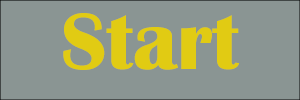
<style>
.page{position:relative;width:300px;height:100px;background:#8a9593}
.page>*{position:absolute;margin:0}
.t1{font:82.8px "BritannicBold";color:#e1cb13}
</style>
<div class="page">
<p class="t1" style="left:63px;top:13px;width:176px;height:57px">Start</p>
</div>
